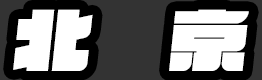
<style>
.page{position:relative;width:262px;height:80px;background:#ffffff}
.page>*{position:absolute;margin:0}
.t1{font:81.8px "zihunqijiyuzhouti_trial";letter-spacing:0.9em;color:#ffffff}
</style>
<div class="page">
<p class="t1" style="left:13px;top:9px;width:236px;height:62px">北京</p>
</div>
